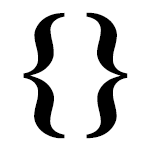
<style>
.page{position:relative;width:152px;height:152px;background:#ffffff}
.page>*{position:absolute;margin:0}
.t1{font:142.5px "TimesNewRomanPS-BoldMT";letter-spacing:0.06em;color:#000000;scale:1.05 1}
</style>
<div class="page">
<p class="t1" style="left:23px;top:12px;width:105px;height:127px">{}</p>
</div>
